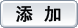
<style>
.page{position:relative;width:78px;height:28px}
.page>*{position:absolute;margin:0}
.t1{font:18px "SimHei";letter-spacing:0.04em;color:#020305;font-weight:bold}
</style>
<div class="page">
<p class="t1" style="left:16px;top:5px;width:45px;height:17px">添 加</p>
</div>
